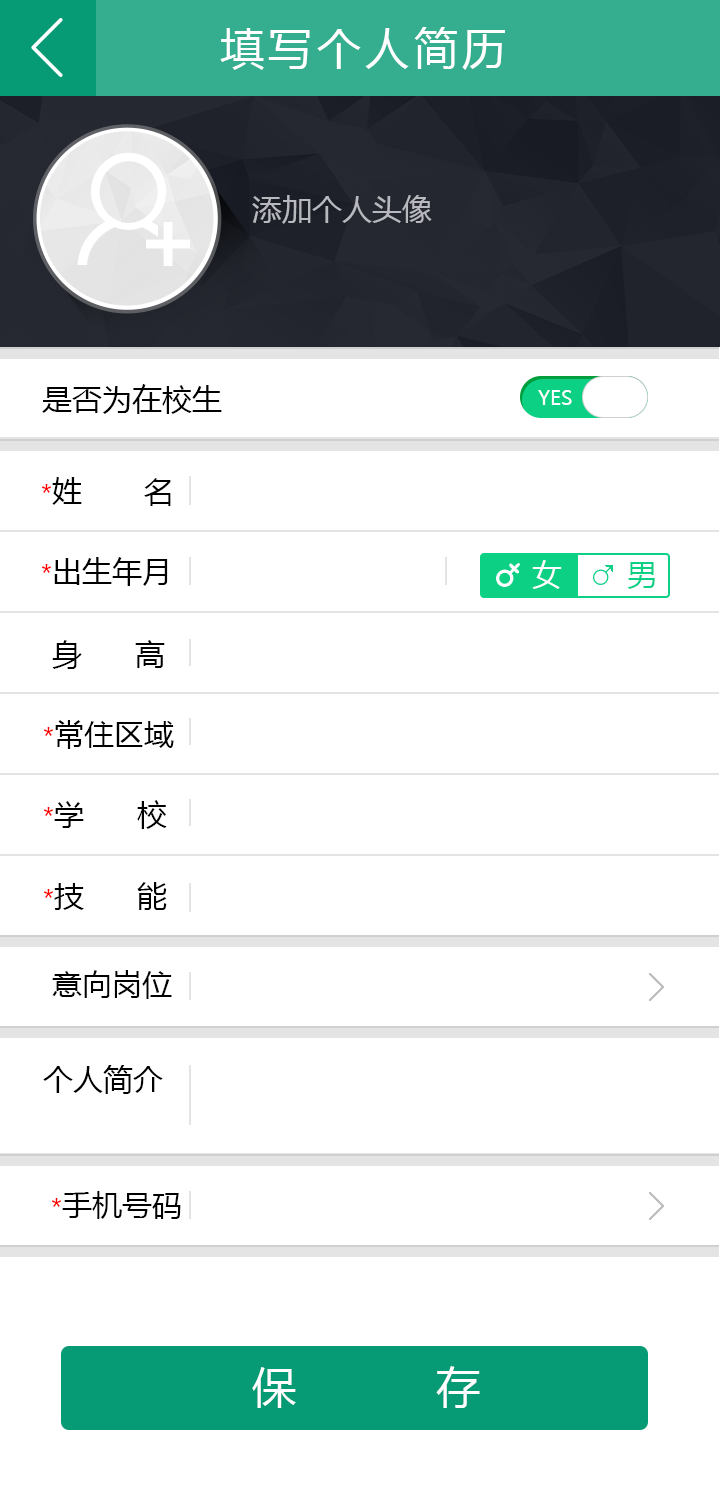
<style>
.page{position:relative;width:720px;height:1500px;background:#ffffff}
.page>*{position:absolute;margin:0}
.t1{font:44px "MicrosoftYaHei";letter-spacing:0.1em;color:#ffffff}
.t2{font:30px "MicrosoftYaHei";color:#b7b9bf}
.t3{font:30px "MicrosoftYaHei";color:#000000}
.t4{font:20px "MicrosoftYaHei";color:#ffffff}
.t5{font:30px/80px "MicrosoftYaHei";color:#000000}
.t6{font:24px/80px "MicrosoftYaHei";color:#fc0000}
.t7{font:30px "MicrosoftYaHei";color:#ffffff}
.t8{font:30px "MicrosoftYaHei";color:#0cd185}
.t9{font:24px "MicrosoftYaHei";color:#fc0000}
.t10{font:44px "MicrosoftYaHei";letter-spacing:0.2em;color:#ffffff}
</style>
<div class="page">
<p class="t1" style="left:220px;top:27px;width:285px;height:43px">填写个人简历</p>
<p class="t2" style="left:252px;top:195px;width:180px;height:29px">添加个人头像</p>
<p class="t3" style="left:42px;top:384px;width:180px;height:30px">是否为在校生</p>
<p class="t4" style="left:538px;top:390px;width:34px;height:15px">YES</p>
<p class="t5" style="left:42px;top:477px;width:129px;height:109px"><span class="t6">*</span>姓       名<br><span class="t6">*</span>出生年月</p>
<p class="t7" style="left:532px;top:560px;width:30px;height:29px">女</p>
<p class="t8" style="left:627px;top:562px;width:28px;height:27px">男</p>
<p class="t5" style="left:44px;top:640px;width:130px;height:189px">身      高<br><span class="t6">*</span>常住区域<br><span class="t6">*</span>学      校</p>
<p class="t3" style="left:44px;top:882px;width:123px;height:28px"><span class="t9">*</span>技      能</p>
<p class="t3" style="left:52px;top:970px;width:120px;height:29px">意向岗位</p>
<p class="t3" style="left:43px;top:1065px;width:120px;height:29px">个人简介</p>
<p class="t3" style="left:52px;top:1191px;width:129px;height:28px"><span class="t9">*</span>手机号码</p>
<p class="t10" style="left:252px;top:1366px;width:228px;height:42px">保      存</p>
</div>
